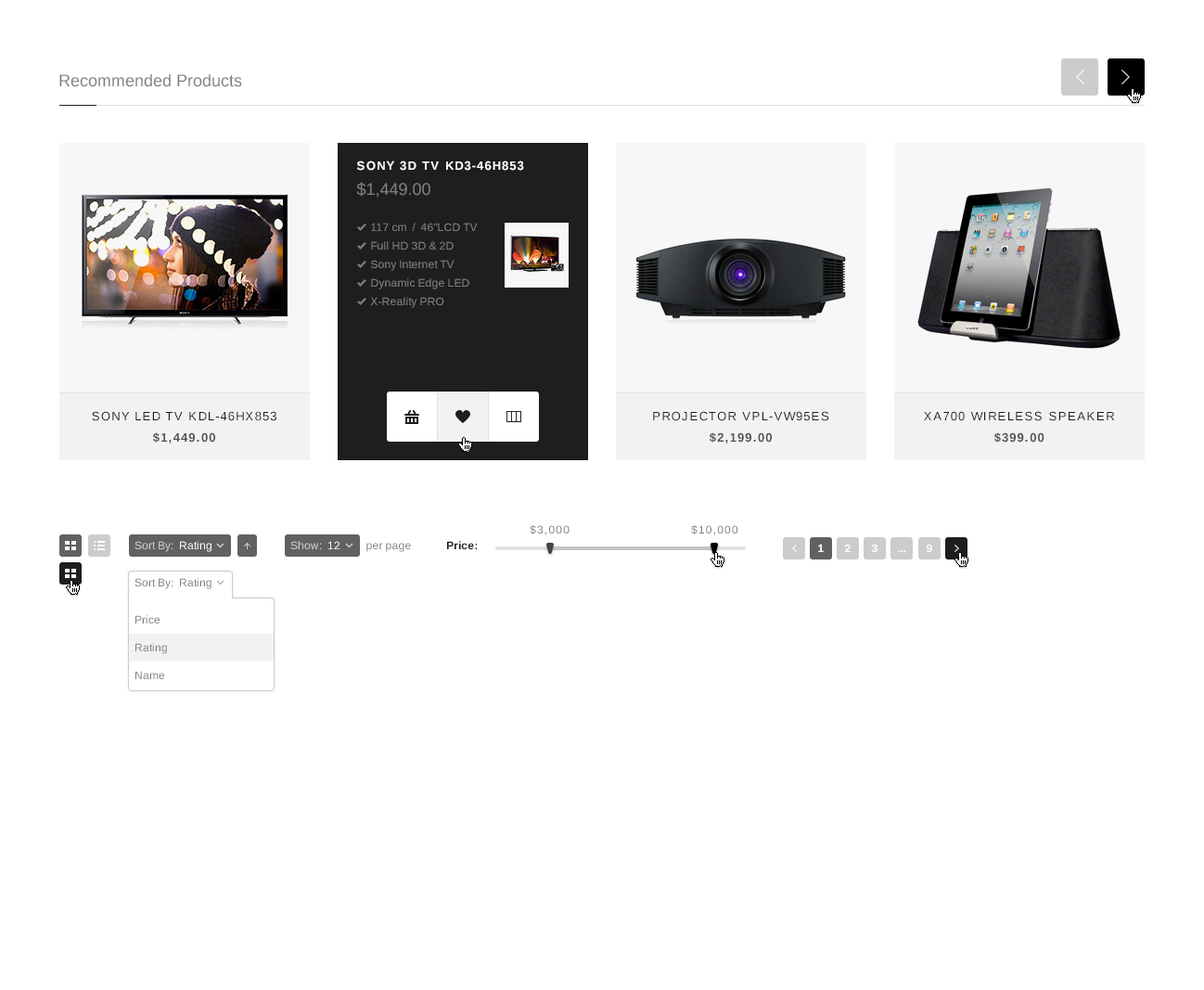
<style>
.page{position:relative;width:1204px;height:990px;background:#ffffff}
.page>*{position:absolute;margin:0}
.t1{font:16.7px "Arimo";color:#7f7f7f}
.t2{font:12.1px "Arimo-Bold";letter-spacing:0.1em;color:#ffffff;text-transform:uppercase}
.t3{font:16.7px "Arimo";color:#7f7f7f;text-transform:uppercase}
.t4{font:11.1px/18.6px "Arimo";color:#7f7f7f}
.t5{font:12.1px "Arimo";letter-spacing:0.1em;color:#1e1e1e;text-transform:uppercase}
.t6{font:12.1px "Arimo-Bold";letter-spacing:0.1em;color:#505050;text-transform:uppercase}
.t7{font:11.1px "Arimo";letter-spacing:0.1em;color:#7f7f7f}
.t8{font:11.1px "Arimo";color:#cccccc}
.t9{font:11.1px "Arimo";color:#f7f7f7}
.t10{font:11.1px "Arimo";color:#7f7f7f}
.t11{font:11.1px "Arimo-Bold";color:#1e1e1e}
.t12{font:11.1px "Arimo-Bold";color:#ffffff}
.t13{font:11.1px/27.8px "Arimo";color:#7f7f7f}
</style>
<div class="page">
<p class="t1" style="left:59px;top:74px;width:183px;height:13px">Recommended Products</p>
<p class="t2" style="left:357px;top:161px;width:167px;height:10px">Sony 3D TV KD3-46H853</p>
<p class="t3" style="left:356px;top:182px;width:75px;height:16px">$1,449.00</p>
<p class="t4" style="left:370px;top:223px;width:108px;height:85px">117 cm  /  46"LCD TV<br>Full HD 3D &amp; 2D<br>Sony Internet TV<br>Dynamic Edge LED<br>X-Reality PRO</p>
<p class="t5" style="left:92px;top:411px;width:185px;height:10px">Sony Led TV KDL-46HX853</p>
<p class="t5" style="left:653px;top:411px;width:177px;height:10px">Projector VPL-VW95ES</p>
<p class="t5" style="left:924px;top:411px;width:190px;height:10px">XA700 Wireless speaker</p>
<p class="t6" style="left:153px;top:432px;width:62px;height:12px">$1,449.00</p>
<p class="t6" style="left:710px;top:432px;width:62px;height:12px">$2,199.00</p>
<p class="t6" style="left:995px;top:432px;width:50px;height:11px">$399.00</p>
<p class="t7" style="left:530px;top:525px;width:40px;height:10px">$3,000</p>
<p class="t7" style="left:691px;top:525px;width:48px;height:10px">$10,000</p>
<p class="t8" style="left:135px;top:541px;width:77px;height:11px">Sort By:  <span class="t9">Rating</span></p>
<p class="t8" style="left:290px;top:541px;width:51px;height:8px">Show: <span class="t9"> 12</span></p>
<p class="t10" style="left:367px;top:543px;width:44px;height:9px">per page</p>
<p class="t11" style="left:447px;top:541px;width:30px;height:8px">Price:</p>
<p class="t12" style="left:818px;top:544px;width:6px;height:8px">1</p>
<p class="t12" style="left:845px;top:544px;width:6px;height:8px">2</p>
<p class="t12" style="left:871px;top:544px;width:7px;height:8px">3</p>
<p class="t12" style="left:927px;top:544px;width:6px;height:8px">9</p>
<p class="t12" style="left:898px;top:550px;width:8px;height:2px">...</p>
<p class="t10" style="left:135px;top:578px;width:77px;height:11px">Sort By:  Rating</p>
<p class="t13" style="left:135px;top:615px;width:32px;height:64px">Price<br>Rating<br>Name</p>
</div>
